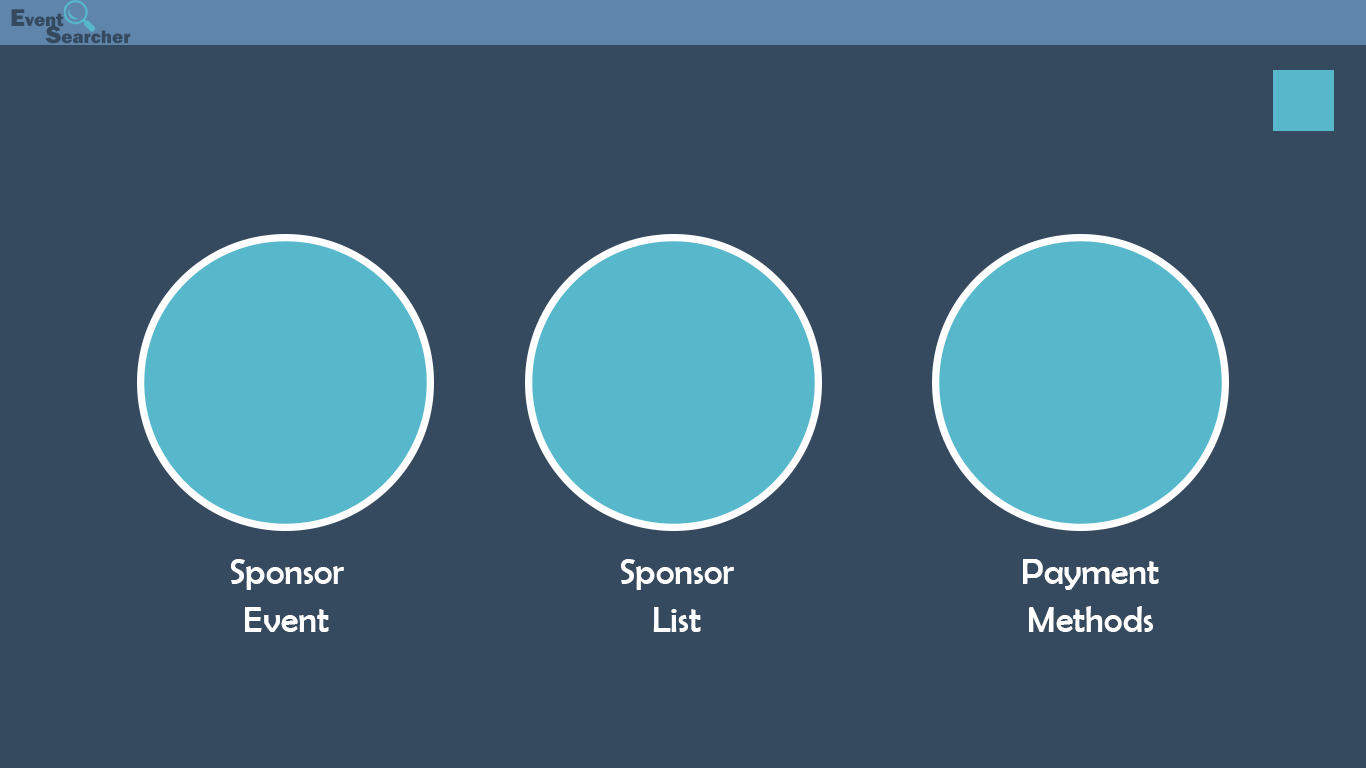
<style>
.page{position:relative;width:1366px;height:768px;background:#35495f}
.page>*{position:absolute;margin:0}
.t1{font:18.8px "FranklinGothic-Heavy";color:#35495f}
.t2{font:25.1px "FranklinGothic-Heavy";color:#35495f}
.t3{font:36px/48px "BerlinSansFB-Reg";color:#ffffff}
</style>
<div class="page">
<p class="t1" style="left:11px;top:9px;width:53px;height:18px"><span class="t2">E</span>vent</p>
<p class="t1" style="left:45px;top:26px;width:86px;height:18px"><span class="t2">S</span>earcher</p>
<p class="t3" style="left:231px;top:559px;width:113px;height:73px;text-align:center">Sponsor<br>Event</p>
<p class="t3" style="left:621px;top:559px;width:113px;height:73px;text-align:center">Sponsor <br>List</p>
<p class="t3" style="left:1023px;top:559px;width:136px;height:73px;text-align:center">Payment <br>Methods</p>
</div>
